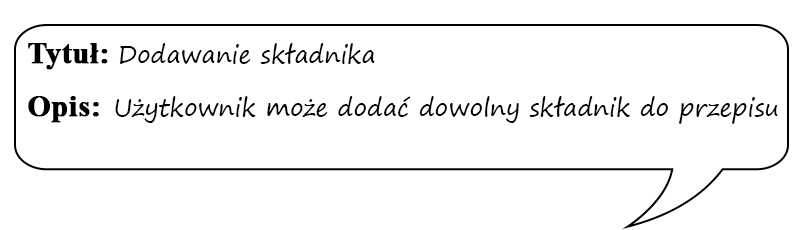
<style>
.page{position:relative;width:800px;height:230px;background:#ffffff}
.page>*{position:absolute;margin:0}
.t1{font:24px "SegoePrint";color:#000000}
.t2{font:30px "TimesNewRomanPS-BoldMT";color:#000000;font-weight:bold}
</style>
<div class="page">
<p class="t1" style="left:28px;top:43px;width:750px;height:81px"><span class="t2">Tytuł: </span>Dodawanie składnika<br><br><span class="t2">Opis:  </span>Użytkownik może dodać dowolny składnik do przepisu</p>
</div>
